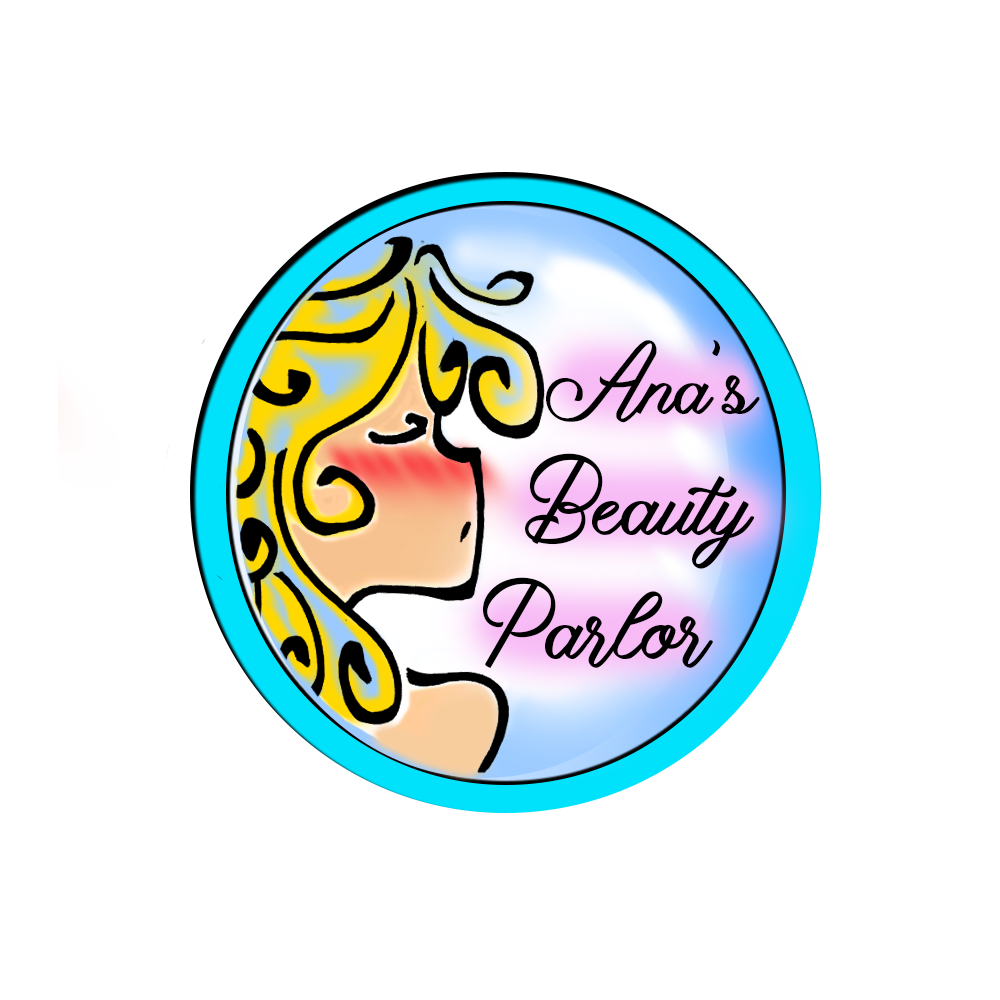
<style>
.page{position:relative;width:1000px;height:1000px;background:#ffffff}
.page>*{position:absolute;margin:0}
.t1{font:100px "AmethaLouring";color:#000000}
.t2{font:110px "AmethaLouring";color:#000000}
</style>
<div class="page">
<p class="t1" style="left:546px;top:340px;width:214px;height:83px">Ana’s</p>
<p class="t2" style="left:525px;top:453px;width:230px;height:116px">Beauty</p>
<p class="t2" style="left:482px;top:577px;width:231px;height:92px">Parlor</p>
</div>
